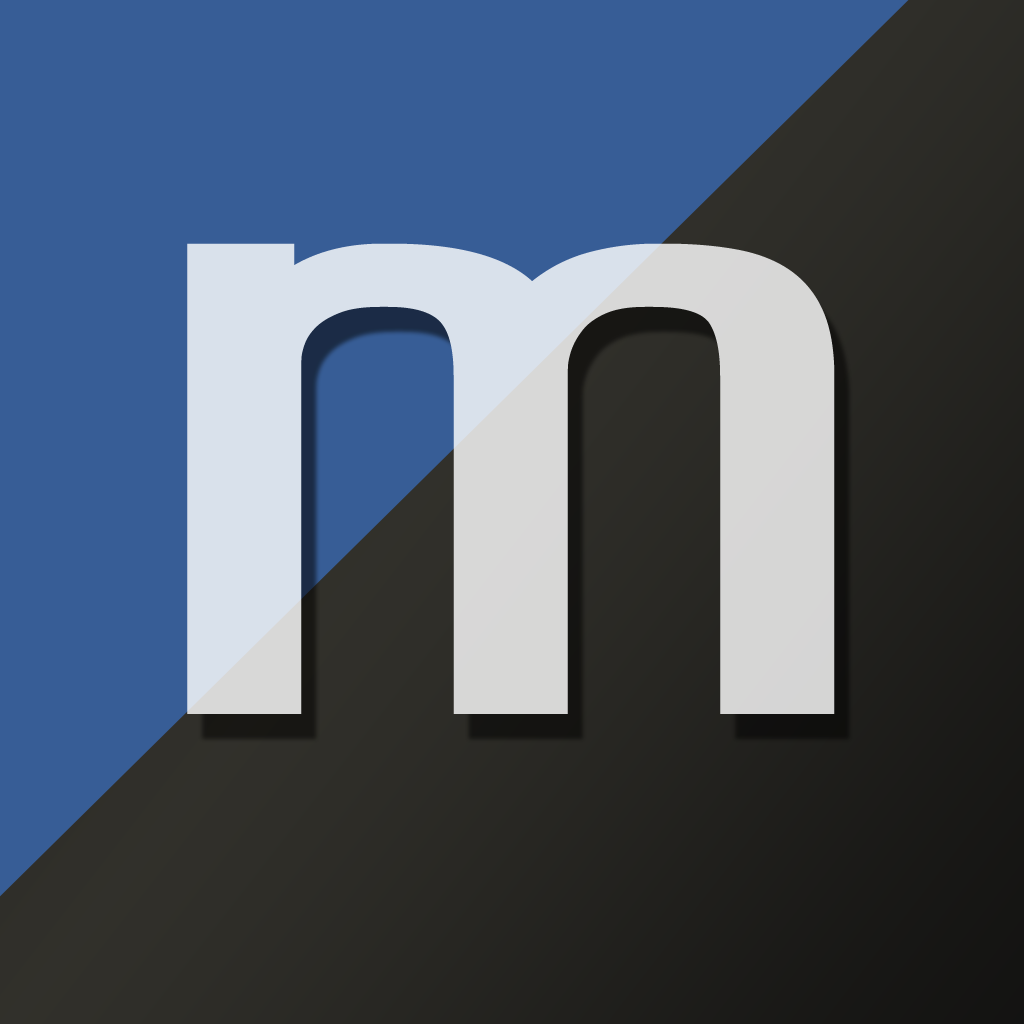
<style>
.page{position:relative;width:1024px;height:1024px;background:#375d96}
.page>*{position:absolute;margin:0}
.t1{font:940.5px "Share-TechMono";letter-spacing:0.09em;color:#d8d8d7;scale:1.52 1}
</style>
<div class="page">
<p class="t1" style="left:187px;top:243px;width:648px;height:471px">m</p>
</div>
